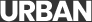
<style>
.page{position:relative;width:92px;height:22px;background:#ffffff}
.page>*{position:absolute;margin:0}
.t1{font:28.8px "Poppins-Bold";letter-spacing:-0.05em;color:#ffffff;text-transform:uppercase}
</style>
<div class="page">
<p class="t1" style="left:0px;top:0px;width:92px;height:22px">urban</p>
</div>
